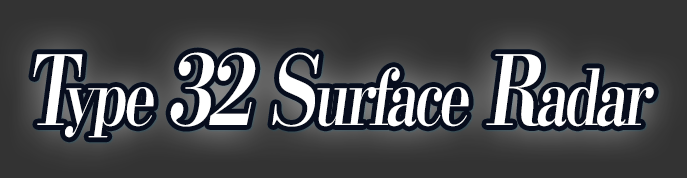
<style>
.page{position:relative;width:687px;height:178px;background:#333333}
.page>*{position:absolute;margin:0}
.t1{font:76.8px "KochoStd-Heavy";letter-spacing:-0.06em;color:#ffffff;font-style:italic;scale:0.75 1}
.t2{font:96px "KochoStd-Heavy";letter-spacing:-0.06em;color:#ffffff;font-style:italic;scale:0.75 1}
</style>
<div class="page">
<p class="t1" style="left:33px;top:52px;width:621px;height:86px"><span class="t2">T</span>ype <span class="t2">32 S</span>urface<span class="t2"> R</span>adar</p>
</div>
